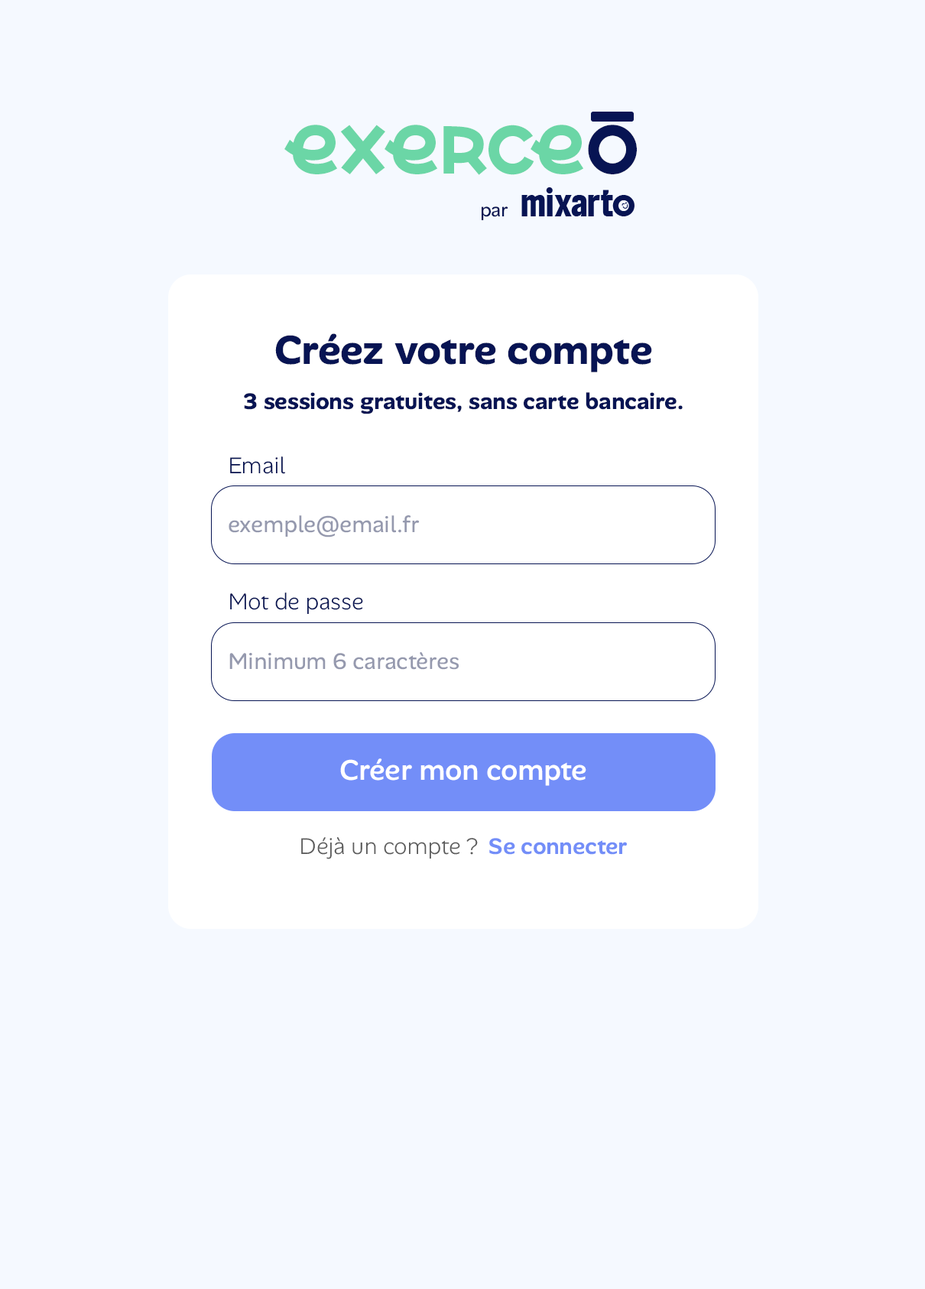
<style>
.page{position:relative;width:925px;height:1289px;background:#f5f9ff}
.page>*{position:absolute;margin:0}
.t1{font:67.8px "MoveSans-Bold";color:#6bd6a6}
.t2{font:67.8px "MoveSans-Bold";color:#071453}
.t3{font:19px "AlanSans-Regular";color:#071453}
.t4{font:41.3px "AlanSans-Bold";color:#071453}
.t5{font:23px "AlanSans-Bold";color:#071453}
.t6{font:23px "AlanSans-Light";color:#071453}
.t7{font:23px "AlanSans-Regular";color:#9599ae}
.t8{font:29.1px "AlanSans-Medium";color:#ffffff}
.t9{font:23px "AlanSans-Light";color:#5b5b5b}
.t10{font:23px "AlanSans-SemiBold";color:#738ef8}
</style>
<div class="page">
<p class="t1" style="left:284px;top:125px;width:353px;height:50px">exerce<span class="t2">o</span></p>
<p class="t3" style="left:482px;top:206px;width:26px;height:14px">par</p>
<p class="t4" style="left:275px;top:333px;width:377px;height:39px">Créez votre compte</p>
<p class="t5" style="left:244px;top:392px;width:439px;height:22px">3 sessions gratuites, sans carte bancaire.</p>
<p class="t6" style="left:230px;top:456px;width:55px;height:18px">Email</p>
<p class="t7" style="left:229px;top:515px;width:191px;height:22px">exemple@email.fr</p>
<p class="t6" style="left:230px;top:593px;width:133px;height:21px">Mot de passe</p>
<p class="t7" style="left:229px;top:652px;width:230px;height:18px">Minimum 6 caractères</p>
<p class="t8" style="left:340px;top:758px;width:246px;height:28px">Créer mon compte</p>
<p class="t9" style="left:301px;top:837px;width:326px;height:22px">Déjà un compte ?  <span class="t10">Se connecter</span></p>
</div>
